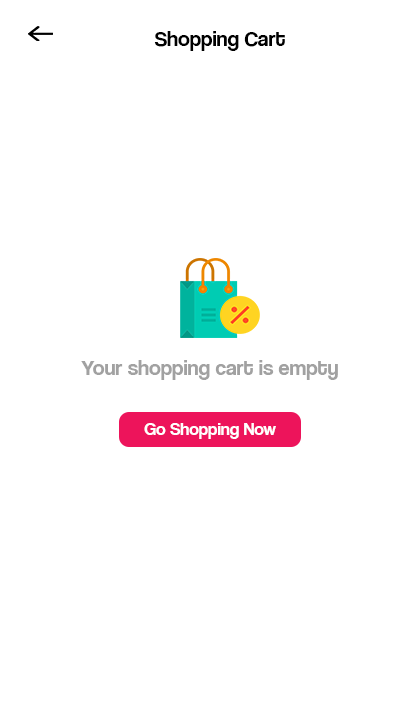
<style>
.page{position:relative;width:420px;height:720px;background:#ffffff}
.page>*{position:absolute;margin:0}
.t1{font:22px "CoolveticaRg-Regular";color:#000000}
.t2{font:22px "CoolveticaRg-Regular";color:#a1a1a1}
.t3{font:18px "CoolveticaRg-Regular";color:#ffffff}
</style>
<div class="page">
<p class="t1" style="left:154px;top:31px;width:131px;height:20px">Shopping Cart</p>
<p class="t2" style="left:81px;top:360px;width:257px;height:20px">Your shopping cart is empty</p>
<p class="t3" style="left:144px;top:423px;width:132px;height:16px">Go Shopping Now</p>
</div>
